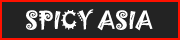
<style>
.page{position:relative;width:180px;height:40px;background:#232323}
.page>*{position:absolute;margin:0}
.t1{font:22px "Jokerman-Regular";color:#ffffff}
</style>
<div class="page">
<p class="t1" style="left:26px;top:9px;width:127px;height:22px">SPICY ASIA</p>
</div>
